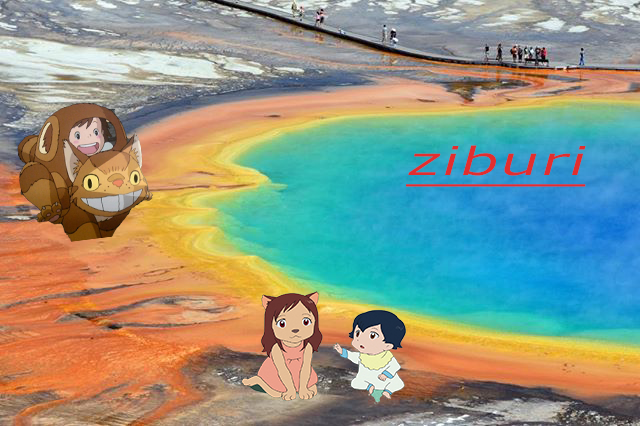
<style>
.page{position:relative;width:640px;height:426px}
.page>*{position:absolute;margin:0}
.t1{font:38.5px "Meiryo";letter-spacing:0.05em;color:#e22e2e;font-style:italic;text-decoration:underline;scale:1.57 1}
</style>
<div class="page">
<p class="t1" style="left:406px;top:145px;width:180px;height:42px">ziburi</p>
</div>
